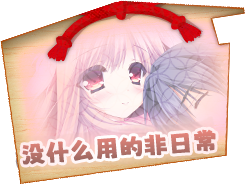
<style>
.page{position:relative;width:245px;height:184px;background:#ffffff}
.page>*{position:absolute;margin:0}
.t1{font:24px "MaokenAssortedSans";font-weight:bold}
</style>
<div class="page">
<p class="t1" style="left:22px;top:129px;width:194px;height:36px;rotate:-4deg">没什么用的非日常</p>
</div>
